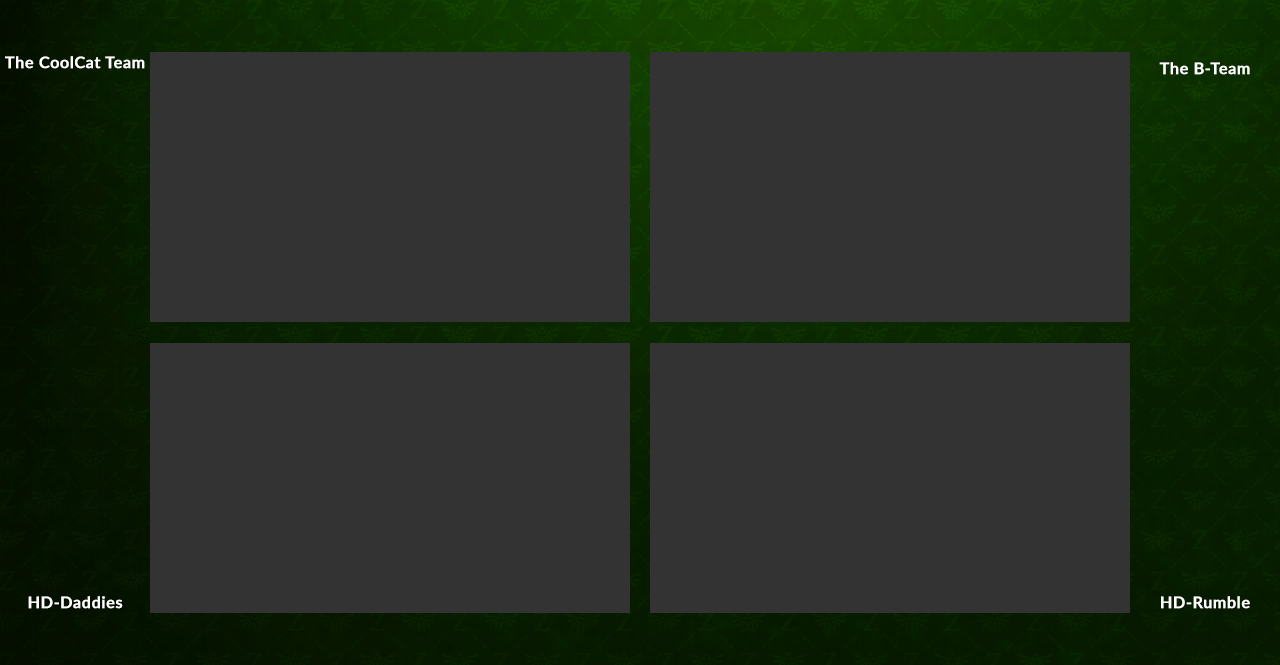
<style>
.page{position:relative;width:1280px;height:665px;background:#333333}
.page>*{position:absolute;margin:0}
.t1{font:16px "Lato-Semibold";letter-spacing:0.02em;color:#ffffff;font-weight:bold}
</style>
<div class="page">
<p class="t1" style="left:5px;top:56px;width:140px;height:13px">The CoolCat Team</p>
<p class="t1" style="left:1159px;top:62px;width:91px;height:13px">The B-Team</p>
<p class="t1" style="left:28px;top:596px;width:95px;height:13px">HD-Daddies</p>
<p class="t1" style="left:1161px;top:596px;width:89px;height:13px">HD-Rumble</p>
</div>
